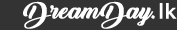
<style>
.page{position:relative;width:177px;height:30px;background:#333333}
.page>*{position:absolute;margin:0}
.t1{font:22px "BacktoBlackDemo";color:#ffffff;font-weight:bold;scale:1.1 1}
.t2{font:22px "MyriadPro-Regular";color:#ffffff;font-weight:bold;scale:1.1 1}
</style>
<div class="page">
<p class="t1" style="left:23px;top:1px;width:154px;height:28px">DreamDay.<span class="t2">lk</span></p>
</div>
